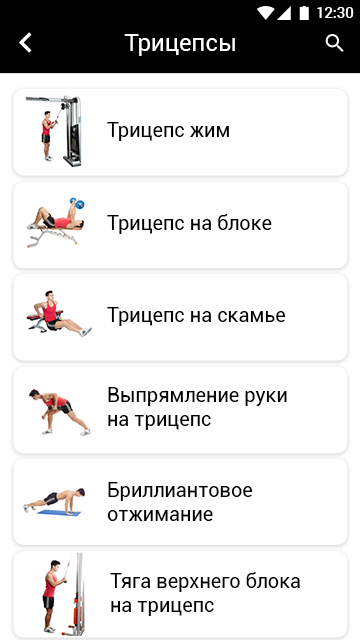
<style>
.page{position:relative;width:360px;height:640px;background:#ffffff}
.page>*{position:absolute;margin:0}
.t1{font:14.7px "Roboto-Medium";color:#ffffff}
.t2{font:24px "Roboto-Regular";color:#ffffff}
.t3{font:20px "Roboto-Regular";color:#000000}
</style>
<div class="page">
<p class="t1" style="left:317px;top:7px;width:37px;height:11px">12:30</p>
<p class="t2" style="left:124px;top:34px;width:111px;height:22px">Трицепсы</p>
<p class="t3" style="left:107px;top:122px;width:122px;height:19px">Трицепс жим</p>
<p class="t3" style="left:107px;top:214px;width:165px;height:20px">Трицепс на блоке</p>
<p class="t3" style="left:107px;top:307px;width:179px;height:19px">Трицепс на скамье</p>
<p class="t3" style="left:108px;top:387px;width:179px;height:43px">Выпрямление руки <br>на трицепс</p>
<p class="t3" style="left:107px;top:482px;width:146px;height:39px">Бриллиантовое <br>отжимание</p>
<p class="t3" style="left:110px;top:572px;width:190px;height:44px">Тяга верхнего блока<br>на трицепс</p>
</div>
